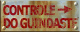
<style>
.page{position:relative;width:80px;height:32px}
.page>*{position:absolute;margin:0}
.t1{font:13px/13px "Verdana-Bold";letter-spacing:-0.1em;font-weight:bold;scale:0.73 1}
</style>
<div class="page">
<p class="t1" style="left:3px;top:5px;width:75px;height:24px">CONTROLE<br>DO GUINDASTE</p>
</div>
